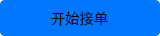
<style>
.page{position:relative;width:160px;height:36px;background:#0077ff}
.page>*{position:absolute;margin:0}
.t1{font:15px "STXihei";letter-spacing:-0.045em;color:#000000}
</style>
<div class="page">
<p class="t1" style="left:51px;top:11px;width:57px;height:15px">开始接单</p>
</div>
